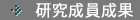
<style>
.page{position:relative;width:140px;height:20px;background:#7a7a7a}
.page>*{position:absolute;margin:0}
.t1{font:16px "DFHei-Md-HK-BF";color:#ffffff;font-weight:bold}
</style>
<div class="page">
<p class="t1" style="left:35px;top:3px;width:98px;height:15px">研究成員成果</p>
</div>
